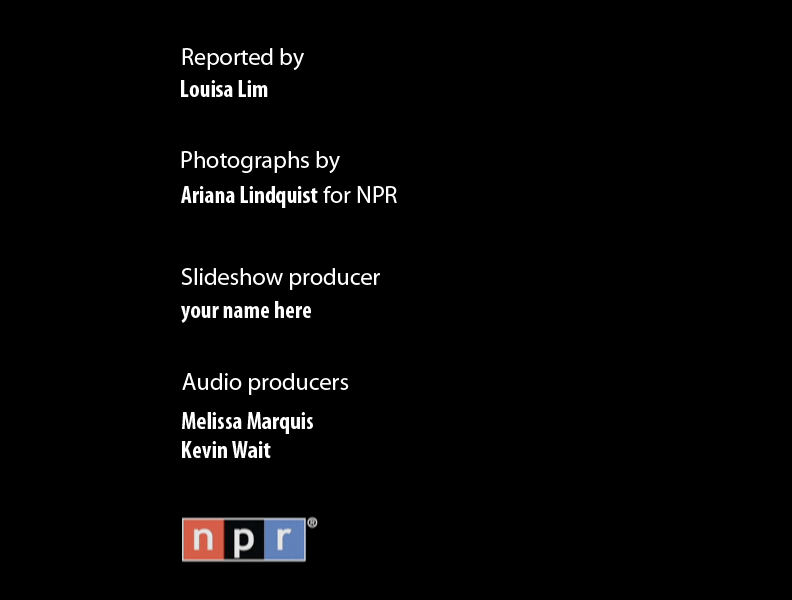
<style>
.page{position:relative;width:792px;height:600px;background:#000000}
.page>*{position:absolute;margin:0}
.t1{font:24px "MyriadPro-Regular";color:#ffffff}
.t2{font:24px "MyriadPro-BoldCond";color:#ffffff}
</style>
<div class="page">
<p class="t1" style="left:182px;top:48px;width:122px;height:22px">Reported by</p>
<p class="t2" style="left:181px;top:80px;width:87px;height:17px">Louisa Lim</p>
<p class="t1" style="left:181px;top:151px;width:159px;height:22px">Photographs by</p>
<p class="t2" style="left:181px;top:186px;width:216px;height:22px">Ariana Lindquist<span class="t1"> for NPR</span></p>
<p class="t1" style="left:181px;top:268px;width:199px;height:22px">Slideshow producer</p>
<p class="t2" style="left:181px;top:301px;width:130px;height:22px">your name here</p>
<p class="t1" style="left:182px;top:373px;width:167px;height:22px">Audio producers</p>
<p class="t2" style="left:182px;top:412px;width:131px;height:46px">Melissa Marquis<br>Kevin Wait</p>
</div>
